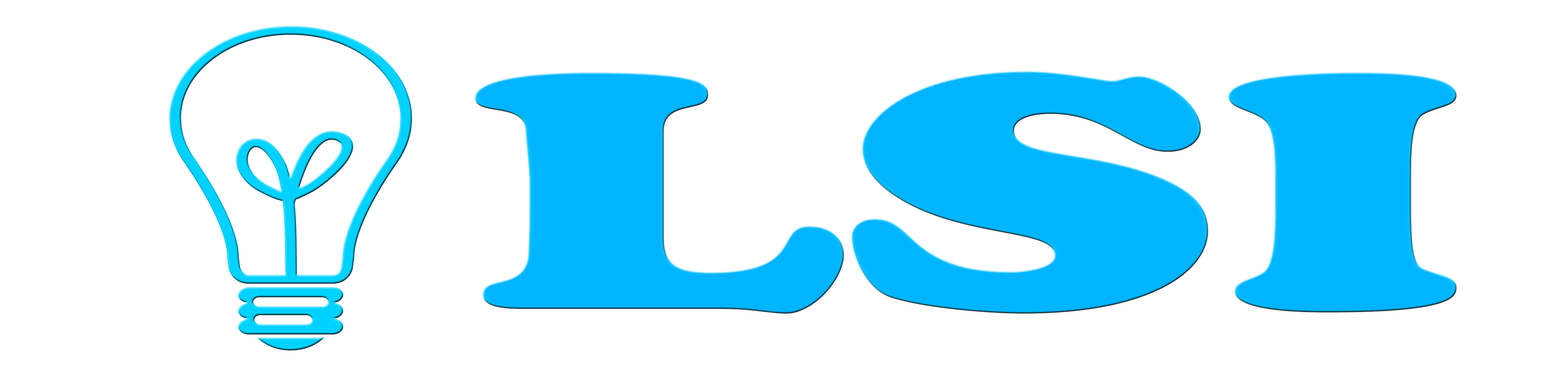
<style>
.page{position:relative;width:1568px;height:392px;background:#ffffff}
.page>*{position:absolute;margin:0}
.t1{font:332.8px "CooperBlackStd";color:#00b4ff;scale:1.69 1}
</style>
<div class="page">
<p class="t1" style="left:475px;top:71px;width:982px;height:243px">LSI</p>
</div>
